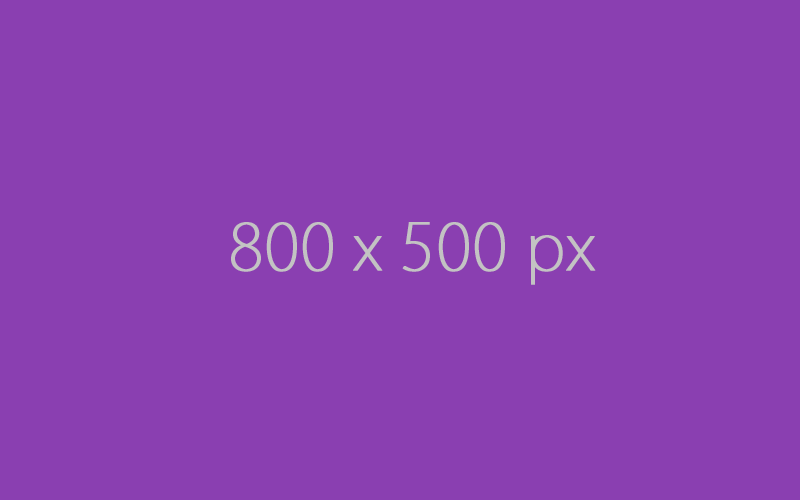
<style>
.page{position:relative;width:800px;height:500px;background:#8a3fb1}
.page>*{position:absolute;margin:0}
.t1{font:64px "KozGoPro-ExtraLight";color:#c3c3c3;font-weight:bold}
</style>
<div class="page">
<p class="t1" style="left:231px;top:222px;width:365px;height:63px">800 x 500 px</p>
</div>
